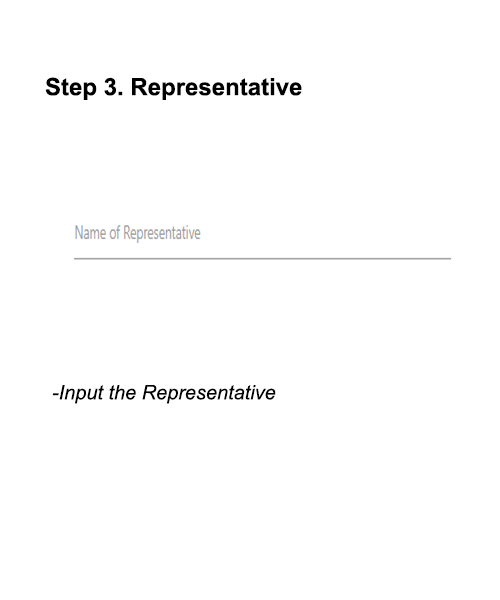
<style>
.page{position:relative;width:500px;height:600px;background:#ffffff}
.page>*{position:absolute;margin:0}
.t1{font:24px "Arial-BoldMT";color:#000000}
.t2{font:20px "Arial-ItalicMT";color:#000000}
</style>
<div class="page">
<p class="t1" style="left:45px;top:77px;width:257px;height:23px">Step 3. Representative</p>
<p class="t2" style="left:52px;top:385px;width:224px;height:19px">-Input the Representative</p>
</div>
